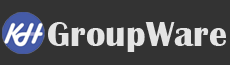
<style>
.page{position:relative;width:230px;height:65px;background:#333333}
.page>*{position:absolute;margin:0}
.t1{font:36.3px "BritannicBold";color:#e4e4e4}
</style>
<div class="page">
<p class="t1" style="left:48px;top:22px;width:178px;height:30px">GroupWare</p>
</div>
